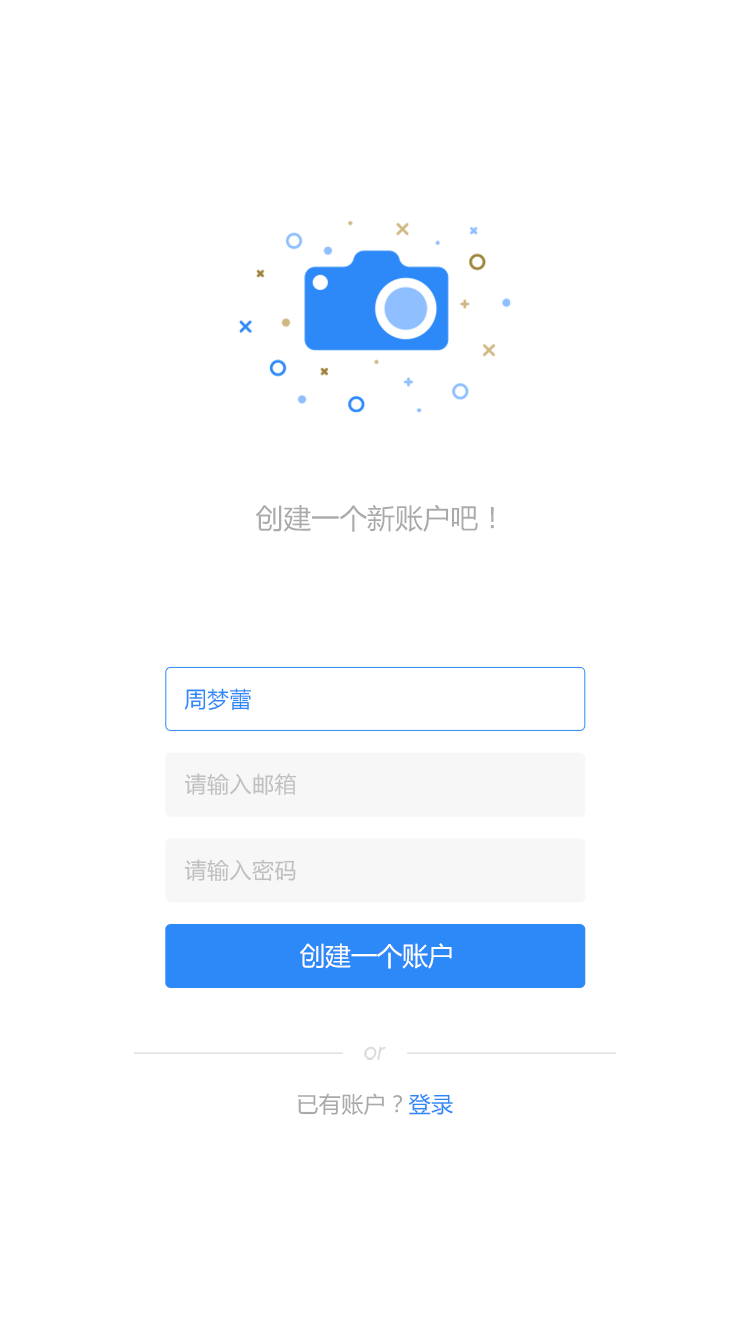
<style>
.page{position:relative;width:750px;height:1334px;background:#ffffff}
.page>*{position:absolute;margin:0}
.t1{font:27.9px "MicrosoftYaHei";color:#a9aaa9}
.t2{font:22px "MicrosoftYaHei";color:#2d89f8}
.t3{font:22px "MicrosoftYaHei";color:#c0c0c0}
.t4{font:26px "MicrosoftYaHei";color:#ffffff}
.t5{font:21.4px "Montserrat-LightItalic";color:#d3d3d3}
.t6{font:22px "MicrosoftYaHei";color:#a9aaa9}
</style>
<div class="page">
<p class="t1" style="left:256px;top:504px;width:238px;height:28px">创建一个新账户吧！</p>
<p class="t2" style="left:184px;top:688px;width:67px;height:22px">周梦蕾</p>
<p class="t3" style="left:184px;top:773px;width:113px;height:23px">请输入邮箱</p>
<p class="t3" style="left:184px;top:859px;width:112px;height:23px">请输入密码</p>
<p class="t4" style="left:300px;top:943px;width:152px;height:26px">创建一个账户</p>
<p class="t5" style="left:364px;top:1047px;width:22px;height:13px">or</p>
<p class="t6" style="left:298px;top:1093px;width:155px;height:22px">已有账户？<span class="t2">登录</span></p>
</div>
